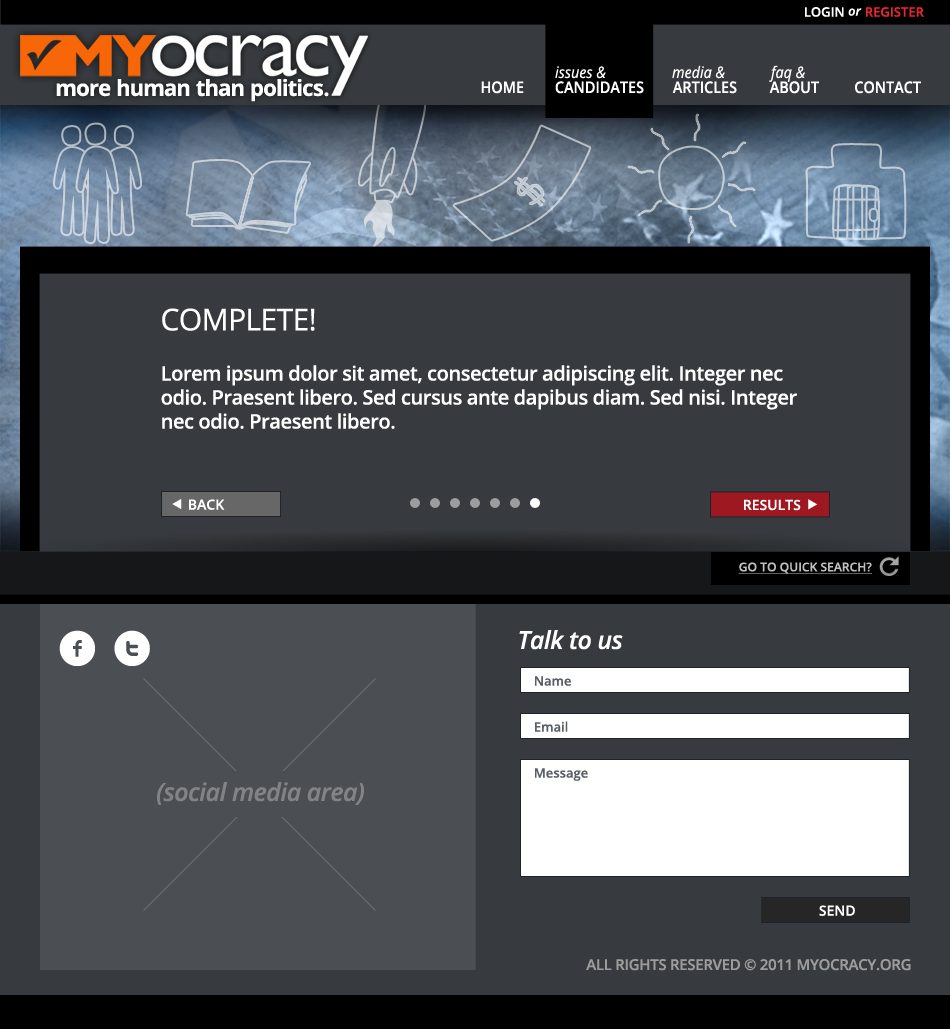
<style>
.page{position:relative;width:950px;height:1029px;background:#373a3e}
.page>*{position:absolute;margin:0}
.t1{font:13px "OpenSans-Semibold";color:#ffffff;text-transform:uppercase}
.t2{font:13px "OpenSans-SemiboldItalic";color:#ffffff}
.t3{font:13px "OpenSans-Semibold";color:#ec2432;text-transform:uppercase}
.t4{font:16px "OpenSans-Italic";color:#ffffff;scale:0.9 1}
.t5{font:22.2px "OpenSans-Bold";letter-spacing:-0.02em;color:#ffffff}
.t6{font:16px "OpenSans-Semibold";color:#ffffff;text-transform:uppercase;scale:0.9 1}
.t7{font:30px "OpenSans";letter-spacing:-0.02em;color:#ffffff;text-transform:uppercase}
.t8{font:20px "OpenSans-Semibold";letter-spacing:-0.02em;color:#ffffff}
.t9{font:14px "OpenSans-Semibold";color:#ffffff}
.t10{font:12px "OpenSans-Semibold";color:#bfbfbf;text-transform:uppercase;text-decoration:underline}
.t11{font:50px "Socialico";letter-spacing:0.3em;color:#ffffff}
.t12{font:25px "OpenSans-SemiboldItalic";letter-spacing:-0.02em;color:#ffffff}
.t13{font:13px "OpenSans-Semibold";color:#5a5e65}
.t14{font:25px "OpenSans-SemiboldItalic";letter-spacing:-0.02em;color:#818386}
.t15{font:15px "OpenSans-Semibold";letter-spacing:-0.02em;color:#9c9c9c;text-transform:uppercase}
</style>
<div class="page">
<p class="t1" style="left:805px;top:7px;width:57px;height:10px">Login <span class="t2">or</span></p>
<p class="t3" style="left:866px;top:7px;width:58px;height:10px">Register</p>
<p class="t4" style="left:672px;top:65px;width:53px;height:14px">media &amp;</p>
<p class="t4" style="left:769px;top:65px;width:36px;height:17px">faq &amp;</p>
<p class="t4" style="left:555px;top:66px;width:51px;height:13px">issues &amp;</p>
<p class="t5" style="left:56px;top:79px;width:273px;height:23px">more human than politics.</p>
<p class="t6" style="left:481px;top:81px;width:43px;height:13px">home</p>
<p class="t6" style="left:555px;top:81px;width:89px;height:13px">candidates</p>
<p class="t6" style="left:672px;top:81px;width:65px;height:13px">articles</p>
<p class="t6" style="left:769px;top:81px;width:50px;height:13px">ABOUT</p>
<p class="t6" style="left:855px;top:81px;width:66px;height:13px">contact</p>
<p class="t7" style="left:162px;top:308px;width:153px;height:23px">Complete!</p>
<p class="t8" style="left:161px;top:365px;width:636px;height:64px">Lorem ipsum dolor sit amet, consectetur adipiscing elit. Integer nec odio. Praesent libero. Sed cursus ante dapibus diam. Sed nisi. Integer nec odio. Praesent libero.</p>
<p class="t9" style="left:189px;top:499px;width:36px;height:11px">BACK</p>
<p class="t9" style="left:744px;top:499px;width:57px;height:12px">RESULTS</p>
<p class="t10" style="left:738px;top:562px;width:134px;height:12px">go to quick search?</p>
<p class="t11" style="left:59px;top:630px;width:91px;height:36px">ft</p>
<p class="t12" style="left:519px;top:630px;width:104px;height:20px">Talk to us</p>
<p class="t13" style="left:535px;top:676px;width:36px;height:10px">Name</p>
<p class="t13" style="left:535px;top:721px;width:33px;height:11px">Email</p>
<p class="t13" style="left:535px;top:768px;width:53px;height:13px">Message</p>
<p class="t14" style="left:157px;top:782px;width:207px;height:23px">(social media area)</p>
<p class="t9" style="left:819px;top:905px;width:36px;height:11px">SEND</p>
<p class="t15" style="left:586px;top:959px;width:325px;height:12px">all rights reserved © 2011 myocracy.org</p>
</div>
